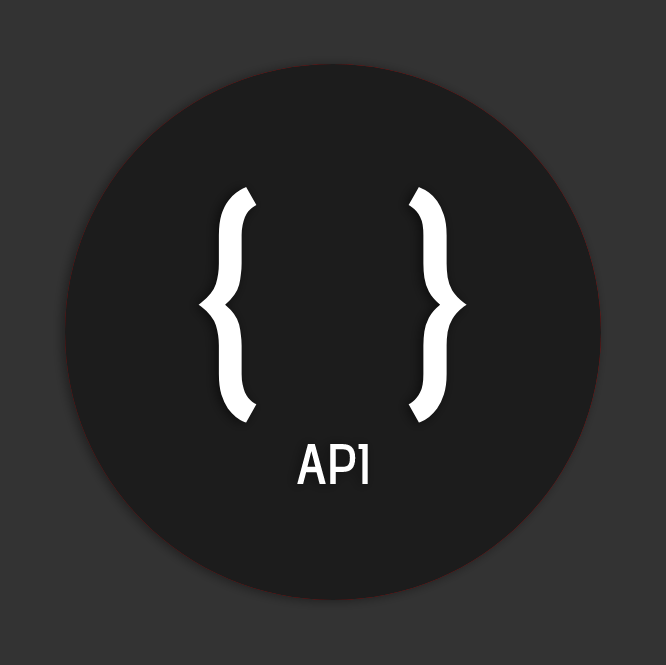
<style>
.page{position:relative;width:666px;height:665px;background:#333333}
.page>*{position:absolute;margin:0}
.t1{font:250px "AdventPro-SemiBold";color:#ffffff}
.t2{font:57px "AdventPro-SemiBold";color:#ffffff}
</style>
<div class="page">
<p class="t1" style="left:198px;top:187px;width:269px;height:236px">{  }</p>
<p class="t2" style="left:297px;top:444px;width:71px;height:40px">API</p>
</div>
